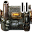
<style>
.page{position:relative;width:32px;height:32px}
.page>*{position:absolute;margin:0}
.t1{font:12px "TRENDS";color:#000000}
</style>
<div class="page">
<p class="t1" style="left:21px;top:2px;width:3px;height:10px">Ⅰ</p>
<p class="t1" style="left:21px;top:2px;width:7px;height:10px">Ⅱ</p>
</div>
